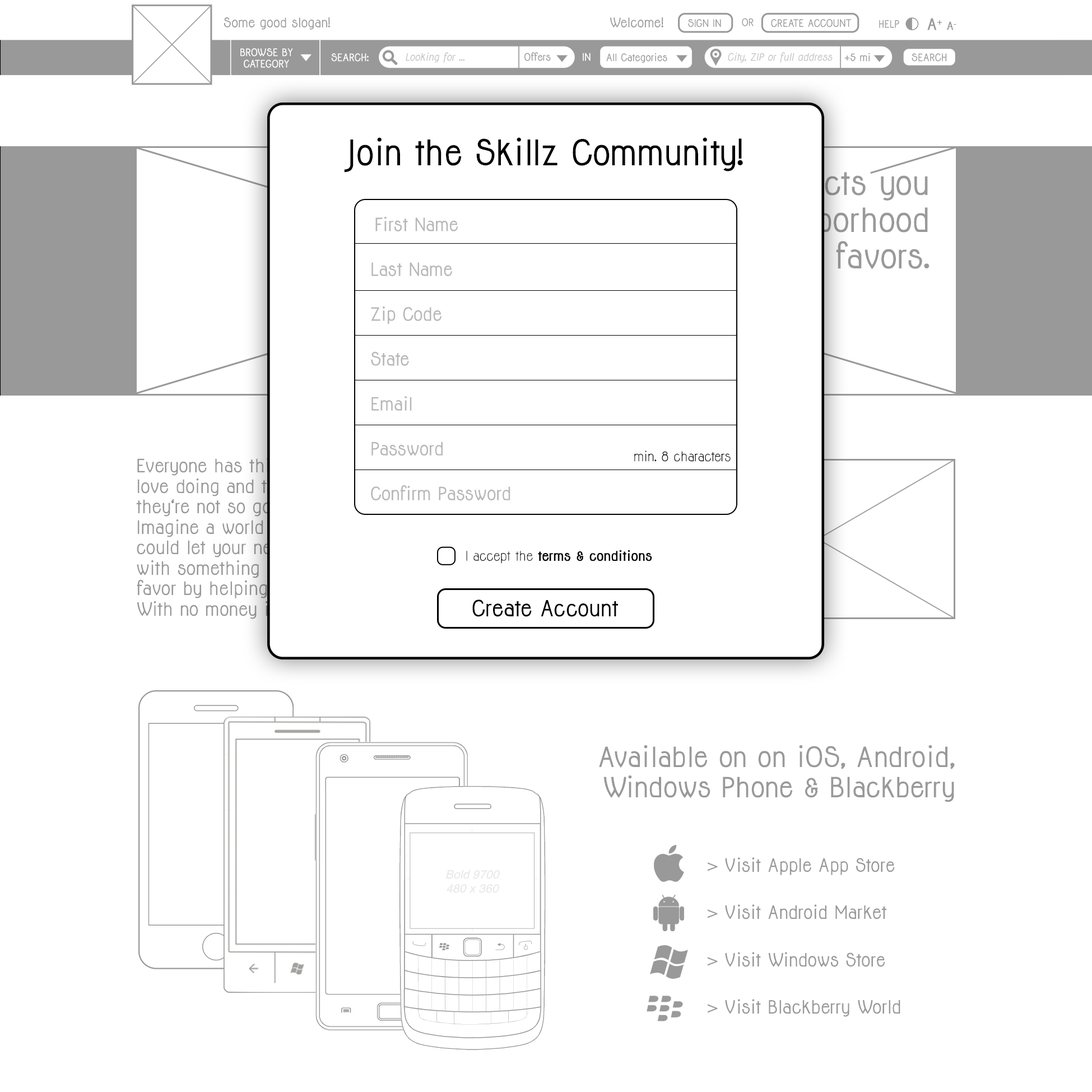
<style>
.page{position:relative;width:1092px;height:1092px;background:#ffffff}
.page>*{position:absolute;margin:0}
.t1{font:32.3px "Jolly-Bold";color:#000000}
.t2{font:16.8px "Jolly-Bold";color:#b8b8b8}
.t3{font:17.1px "Jolly-Bold"}
.t4{font:12.3px "Jolly";color:#000000}
.t5{font:12.3px "Jolly-Bold";color:#000000;font-weight:bold}
.t6{font:20.5px "Jolly-Bold";color:#000000}
.t7{font:25.6px "Jolly-Bold";letter-spacing:0.01em;color:#999999}
.t8{font:25.6px "Jolly-Bold";color:#999999}
.t9{font:16.8px/47.3px "Jolly-Bold";color:#999999}
</style>
<div class="page">
<p class="t1" style="left:344px;top:137px;width:399px;height:36px">Join the Skillz Community!</p>
<p class="t2" style="left:375px;top:216px;width:83px;height:15px">First Name</p>
<p class="t2" style="left:371px;top:262px;width:81px;height:14px">Last Name</p>
<p class="t2" style="left:371px;top:306px;width:71px;height:18px">Zip Code</p>
<p class="t2" style="left:371px;top:351px;width:38px;height:15px">State</p>
<p class="t2" style="left:371px;top:396px;width:41px;height:15px">Email</p>
<p class="t2" style="left:371px;top:442px;width:72px;height:14px">Password</p>
<p class="t3" style="left:136px;top:458px;width:263px;height:161px">Everyone has things that they love doing and things that <br>they‘re not so good at. <br>Imagine a world in which you could let your neighbor help you with something and return the favor by helping somebody else. With no money involved.</p>
<p class="t4" style="left:634px;top:450px;width:97px;height:12px">min. 8 characters</p>
<p class="t2" style="left:371px;top:485px;width:139px;height:16px">Confirm Password</p>
<p class="t5" style="left:466px;top:550px;width:186px;height:13px"><span class="t4">I accept the </span>terms &amp; conditions</p>
<p class="t6" style="left:472px;top:599px;width:146px;height:18px">Create Account</p>
<p class="t7" style="left:599px;top:745px;width:356px;height:57px;text-align:right">Available on on iOS, Android, <span class="t8">Windows Phone &amp; Blackberry</span></p>
<p class="t9" style="left:708px;top:857px;width:192px;height:160px">&gt; Visit Apple App Store<br>&gt; Visit Android Market<br>&gt; Visit Windows Store<br>&gt; Visit Blackberry World</p>
</div>
